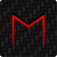
<style>
.page{position:relative;width:57px;height:57px;background:#0c0c0d}
.page>*{position:absolute;margin:0}
.t1{font:36px "Fh_Blue";scale:1.12 1}
</style>
<div class="page">
<p class="t1" style="left:12px;top:15px;width:33px;height:30px">M</p>
</div>
